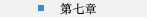
<style>
.page{position:relative;width:147px;height:17px;background:#f1f1f1}
.page>*{position:absolute;margin:0}
.t1{font:12px "SimSun";color:#000000;font-weight:bold}
</style>
<div class="page">
<p class="t1" style="left:40px;top:0px;width:77px;height:18px">第七章</p>
</div>
